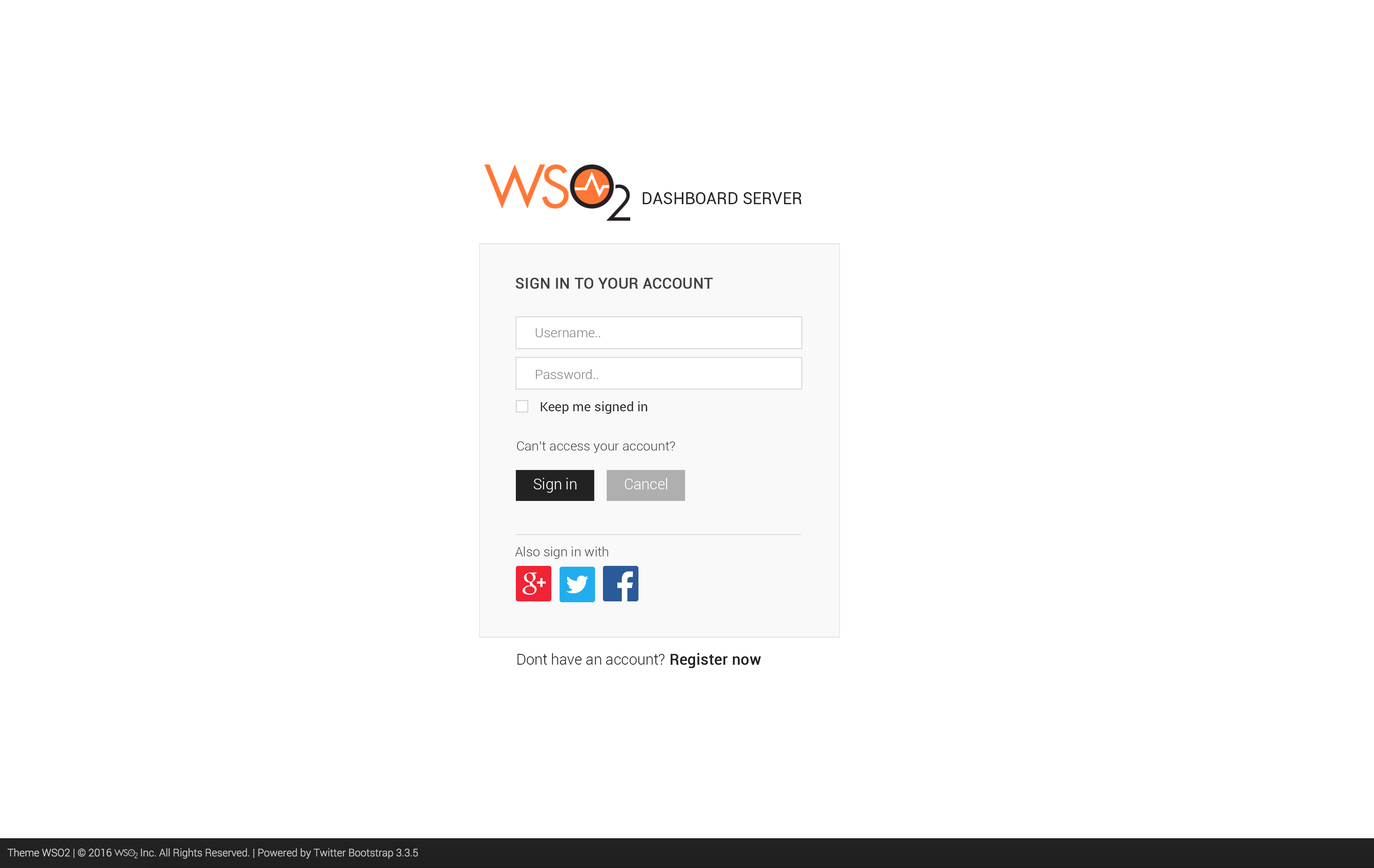
<style>
.page{position:relative;width:1374px;height:868px;background:#ffffff}
.page>*{position:absolute;margin:0}
.t1{font:16.5px "Roboto-Regular";color:#252525;text-transform:uppercase}
.t2{font:14.9px "Roboto-Regular";color:#414141;text-transform:uppercase;font-weight:bold}
.t3{font:13.2px "Roboto-Light";color:#7e7e7e}
.t4{font:13.2px "Roboto-Regular";color:#2c2c2c}
.t5{font:13.2px "Roboto-Light";color:#414141}
.t6{font:14.9px "Roboto-Light";color:#ffffff}
.t7{font:14.9px "Roboto-Light";color:#222222}
.t8{font:14.9px "Roboto-Regular";color:#222222;font-weight:bold}
</style>
<div class="page">
<p class="t1" style="left:643px;top:192px;width:159px;height:12px">Dashboard Server</p>
<p class="t2" style="left:516px;top:278px;width:197px;height:11px">Sign in to your account</p>
<p class="t3" style="left:536px;top:328px;width:64px;height:9px">Username..</p>
<p class="t3" style="left:536px;top:369px;width:62px;height:10px">Password..</p>
<p class="t4" style="left:541px;top:401px;width:106px;height:13px">Keep me signed in</p>
<p class="t5" style="left:517px;top:441px;width:158px;height:12px">Can’t access your account?</p>
<p class="t6" style="left:534px;top:478px;width:43px;height:14px">Sign in</p>
<p class="t6" style="left:625px;top:478px;width:43px;height:11px">Cancel</p>
<p class="t5" style="left:515px;top:546px;width:94px;height:13px">Also sign in with</p>
<p class="t7" style="left:518px;top:653px;width:243px;height:15px">Dont have an account?<span class="t8"> Register now</span></p>
</div>
